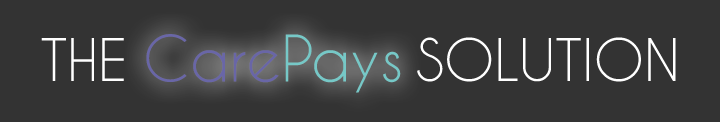
<style>
.page{position:relative;width:720px;height:122px;background:#333333}
.page>*{position:absolute;margin:0}
.t1{font:55px "CaviarDreams";color:#ffffff}
.t2{font:60px "CaviarDreams";color:#6966a7}
.t3{font:60px "CaviarDreams";color:#76c8c7}
</style>
<div class="page">
<p class="t1" style="left:41px;top:37px;width:635px;height:45px">THE              SOLUTION</p>
<p class="t2" style="left:146px;top:34px;width:255px;height:59px">Care<span class="t3">Pays</span></p>
</div>
